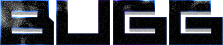
<style>
.page{position:relative;width:223px;height:45px;background:#000000}
.page>*{position:absolute;margin:0}
.t1{font:60px "Dredd-Black";color:#010206}
</style>
<div class="page">
<p class="t1" style="left:0px;top:0px;width:223px;height:45px">BUGG</p>
</div>
